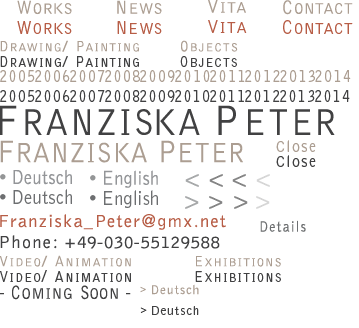
<style>
.page{position:relative;width:359px;height:328px;background:#ffffff}
.page>*{position:absolute;margin:0}
.t1{font:19.1px "BellGothicStd-Light";letter-spacing:0.06em;color:#ac9e92;font-variant:small-caps;scale:0.84 1}
.t2{font:22px "BellGothicStd-Light";letter-spacing:0.02em;color:#ac9e92;font-variant:small-caps}
.t3{font:21.6px "BellGothicStd-Light";color:#ac9e92;font-variant:small-caps}
.t4{font:22px "BellGothicStd-Light";letter-spacing:0.03em;color:#ac9e92;font-variant:small-caps}
.t5{font:22px "BellGothicStd-Light";color:#ac9e92;font-variant:small-caps}
.t6{font:19.1px "BellGothicStd-Light";letter-spacing:0.04em;color:#ac9e92;font-variant:small-caps;scale:0.92 1}
.t7{font:22px "BellGothicStd-Light";letter-spacing:0.06em;color:#ac9e92;font-variant:small-caps}
.t8{font:19.1px "BellGothicStd-Light";letter-spacing:0.07em;color:#ac9e92;font-variant:small-caps;scale:0.92 1}
.t9{font:22px "BellGothicStd-Light";letter-spacing:0.025em;color:#ac9e92;font-variant:small-caps}
.t10{font:19.6px "BellGothicStd-Light";letter-spacing:0.08em;color:#ac9e92;font-variant:small-caps;scale:0.9 1}
.t11{font:22px "BellGothicStd-Light";letter-spacing:0.02em;color:#b75d46;font-variant:small-caps}
.t12{font:19.1px "BellGothicStd-Light";letter-spacing:0.06em;color:#b75d46;font-variant:small-caps;scale:0.84 1}
.t13{font:22.4px "BellGothicStd-Light";letter-spacing:0.02em;color:#b75d46;font-variant:small-caps}
.t14{font:22px "BellGothicStd-Light";color:#b75d46;font-variant:small-caps}
.t15{font:19.1px "BellGothicStd-Light";letter-spacing:0.04em;color:#b75d46;font-variant:small-caps;scale:0.92 1}
.t16{font:19.1px "BellGothicStd-Light";letter-spacing:0.07em;color:#b75d46;font-variant:small-caps;scale:0.92 1}
.t17{font:22px "BellGothicStd-Light";letter-spacing:0.06em;color:#b75d46;font-variant:small-caps}
.t18{font:22.9px "BellGothicStd-Light";letter-spacing:0.025em;color:#b75d46;font-variant:small-caps;scale:0.96 1}
.t19{font:19.8px "BellGothicStd-Light";letter-spacing:0.08em;color:#b75d46;font-variant:small-caps;scale:0.89 1}
.t20{font:22px "BellGothicStd-Light";letter-spacing:-0.04em;color:#b75d46;font-variant:small-caps}
.t21{font:23.1px "BellGothicStd-Light";letter-spacing:0.02em;color:#b75d46;font-variant:small-caps;scale:0.95 1}
.t22{font:17px "BellGothicStd-Light";letter-spacing:0.08em;color:#ac9e92;font-variant:small-caps}
.t23{font:15.3px "BellGothicStd-Light";letter-spacing:0.1em;color:#ac9e92;font-variant:small-caps;scale:0.89 1}
.t24{font:15.3px "BellGothicStd-Light";letter-spacing:0.1em;color:#ac9e92;font-variant:small-caps;scale:1.11 1}
.t25{font:15.3px "BellGothicStd-Light";letter-spacing:0.06em;color:#ac9e92;font-variant:small-caps;scale:0.89 1}
.t26{font:17px "BellGothicStd-Light";letter-spacing:0.08em;color:#414142;font-variant:small-caps}
.t27{font:15.3px "BellGothicStd-Light";letter-spacing:0.1em;color:#414142;font-variant:small-caps;scale:0.89 1}
.t28{font:15.3px "BellGothicStd-Light";letter-spacing:0.1em;color:#414142;font-variant:small-caps;scale:1.11 1}
.t29{font:15.3px "BellGothicStd-Light";letter-spacing:0.06em;color:#414142;font-variant:small-caps;scale:0.89 1}
.t30{font:18px "BellGothicStd-Light";letter-spacing:0.1em;color:#ac9e92;font-variant:small-caps;scale:0.8 1}
.t31{font:18px "BellGothicStd-Light";letter-spacing:0.1em;color:#ac9e92;font-variant:small-caps;scale:0.77 1}
.t32{font:18px "BellGothicStd-Light";letter-spacing:0.1em;color:#414142;font-variant:small-caps;scale:0.8 1}
.t33{font:55px "BellGothicStd-Light";letter-spacing:0.04em;color:#414142;font-variant:small-caps;scale:0.9 1}
.t34{font:44px "BellGothicStd-Light";letter-spacing:0.04em;color:#414142;font-variant:small-caps;scale:0.9 1}
.t35{font:52.2px "BellGothicStd-Light";letter-spacing:-0.06em;color:#414142;font-variant:small-caps;scale:0.95 1}
.t36{font:55px "BellGothicStd-Light";letter-spacing:0.06em;color:#414142;font-variant:small-caps;scale:0.9 1}
.t37{font:44px "BellGothicStd-Light";letter-spacing:0.1em;color:#414142;font-variant:small-caps;scale:0.9 1}
.t38{font:41px "BellGothicStd-Light";letter-spacing:0.02em;color:#ac9e92;font-variant:small-caps;scale:0.9 1}
.t39{font:32px "BellGothicStd-Light";color:#ac9e92;font-variant:small-caps;scale:0.9 1}
.t40{font:39.8px "BellGothicStd-Light";letter-spacing:0.02em;color:#ac9e92;font-variant:small-caps;scale:0.93 1}
.t41{font:16px "BellGothicStd-Light";letter-spacing:0.08em;color:#ac9e92}
.t42{font:16px "BellGothicStd-Light";letter-spacing:0.08em;color:#414142}
.t43{font:20px "BellGothicStd-Light";letter-spacing:0.02em;color:#939598;scale:0.9 1}
.t44{font:21px "BellGothicStd-Light";letter-spacing:0.02em;color:#939598;scale:0.9 1}
.t45{font:20px "BellGothicStd-Light";letter-spacing:0.02em;color:#6d6f71;scale:0.9 1}
.t46{font:21px "BellGothicStd-Light";letter-spacing:0.02em;color:#6d6f71;scale:0.9 1}
.t47{font:18px "BellGothicStd-Light";letter-spacing:0.08em;color:#b75d46}
.t48{font:15.3px "BellGothicStd-Light";letter-spacing:0.1em;color:#6d6f71;scale:0.89 1}
.t49{font:18px "BellGothicStd-Light";letter-spacing:0.08em;color:#414142}
.t50{font:18px "BellGothicStd-Light";color:#414142}
.t51{font:18px "BellGothicStd-Light";letter-spacing:0.04em;color:#414142}
.t52{font:17px "BellGothicStd-Light";letter-spacing:0.1em;color:#ac9e92;font-variant:small-caps}
.t53{font:17px "BellGothicStd-Light";letter-spacing:0.1em;color:#414142;font-variant:small-caps}
.t54{font:22px "BellGothicStd-Light";letter-spacing:0.02em;color:#414142;font-variant:small-caps}
.t55{font:19.1px "BellGothicStd-Light";letter-spacing:0.06em;color:#414142;font-variant:small-caps;scale:0.84 1}
.t56{font:19.1px "BellGothicStd-Light";letter-spacing:-0.02em;color:#414142;font-variant:small-caps;scale:0.84 1}
.t57{font:22px "BellGothicStd-Light";color:#414142;font-variant:small-caps}
.t58{font:13px "BellGothicStd-Light";letter-spacing:0.08em;color:#ac9e92}
.t59{font:10px "BellGothicStd-Light";letter-spacing:0.08em;color:#ac9e92}
.t60{font:13px "BellGothicStd-Light";letter-spacing:0.04em;color:#ac9e92}
.t61{font:13px "BellGothicStd-Light";letter-spacing:0.08em;color:#ac9e92;scale:1.06 1}
.t62{font:13px "BellGothicStd-Light";letter-spacing:0.08em;color:#414142}
.t63{font:10px "BellGothicStd-Light";letter-spacing:0.08em;color:#414142}
.t64{font:11.7px "BellGothicStd-Light";letter-spacing:0.08em;color:#414142;scale:1.11 1}
.t65{font:13px "BellGothicStd-Light";letter-spacing:0.06em;color:#414142}
.t66{font:12.3px "BellGothicStd-Light";letter-spacing:0.12em;color:#414142;scale:1.04 1}
.t67{font:13px "BellGothicStd-Light";letter-spacing:0.04em;color:#414142}
.t68{font:11.8px "BellGothicStd-Light";letter-spacing:0.08em;color:#414142;scale:1.1 1}
</style>
<div class="page">
<p class="t1" style="left:17px;top:0px;width:55px;height:15px">W<span class="t2">o</span><span class="t3">r</span><span class="t4">k</span><span class="t2">s</span></p>
<p class="t5" style="left:117px;top:0px;width:45px;height:14px"><span class="t6">N</span><span class="t2">e</span>ws</p>
<p class="t7" style="left:208px;top:0px;width:38px;height:13px"><span class="t8">V</span>it<span class="t9">a</span></p>
<p class="t2" style="left:283px;top:0px;width:70px;height:15px"><span class="t10">C</span>ontact</p>
<p class="t11" style="left:17px;top:21px;width:55px;height:13px"><span class="t12">W</span>o<span class="t13">r</span>ks</p>
<p class="t14" style="left:117px;top:21px;width:45px;height:13px"><span class="t15">N</span><span class="t11">e</span>ws</p>
<p class="t16" style="left:208px;top:20px;width:39px;height:13px">V<span class="t17">i</span><span class="t11">t</span><span class="t18">a</span></p>
<p class="t11" style="left:283px;top:20px;width:70px;height:14px"><span class="t19">C</span>on<span class="t20">t</span><span class="t21">a</span>ct</p>
<p class="t22" style="left:0px;top:40px;width:139px;height:12px"><span class="t23">D</span>rawing<span class="t24">/ </span><span class="t25">P</span>ainting</p>
<p class="t22" style="left:181px;top:40px;width:57px;height:12px"><span class="t23">O</span>bjects</p>
<p class="t26" style="left:0px;top:56px;width:139px;height:11px"><span class="t27">D</span>rawing<span class="t28">/ </span><span class="t29">P</span>ainting</p>
<p class="t26" style="left:180px;top:56px;width:57px;height:11px"><span class="t27">O</span>bjects</p>
<p class="t30" style="left:0px;top:70px;width:35px;height:12px">2005</p>
<p class="t30" style="left:35px;top:70px;width:35px;height:12px">200<span class="t31">6</span></p>
<p class="t30" style="left:70px;top:70px;width:35px;height:12px">2007</p>
<p class="t30" style="left:105px;top:70px;width:35px;height:12px">2008</p>
<p class="t30" style="left:140px;top:70px;width:35px;height:12px">2009</p>
<p class="t30" style="left:175px;top:70px;width:35px;height:12px">2010</p>
<p class="t30" style="left:210px;top:70px;width:35px;height:12px">2011</p>
<p class="t30" style="left:245px;top:70px;width:35px;height:12px">2012</p>
<p class="t30" style="left:280px;top:70px;width:35px;height:12px">2013</p>
<p class="t30" style="left:315px;top:70px;width:36px;height:12px">2014</p>
<p class="t32" style="left:0px;top:90px;width:35px;height:12px">2005</p>
<p class="t32" style="left:35px;top:90px;width:35px;height:12px">2006</p>
<p class="t32" style="left:70px;top:90px;width:35px;height:12px">2007</p>
<p class="t32" style="left:105px;top:90px;width:35px;height:12px">2008</p>
<p class="t32" style="left:140px;top:90px;width:35px;height:12px">2009</p>
<p class="t32" style="left:175px;top:90px;width:35px;height:12px">2010</p>
<p class="t32" style="left:210px;top:90px;width:34px;height:12px">2011</p>
<p class="t32" style="left:245px;top:90px;width:35px;height:12px">2012</p>
<p class="t32" style="left:280px;top:90px;width:35px;height:12px">2013</p>
<p class="t32" style="left:315px;top:90px;width:35px;height:12px">2014</p>
<p class="t33" style="left:0px;top:105px;width:335px;height:30px"><span class="t34">F</span>ranzi<span class="t35">s</span><span class="t36">k</span>a <span class="t37">P</span>eter</p>
<p class="t38" style="left:0px;top:140px;width:243px;height:23px"><span class="t39">F</span>ranzi<span class="t40">s</span>ka <span class="t39">P</span>eter</p>
<p class="t41" style="left:276px;top:140px;width:40px;height:12px">Close</p>
<p class="t42" style="left:276px;top:155px;width:40px;height:12px">Close</p>
<p class="t43" style="left:13px;top:169px;width:59px;height:16px"><span class="t44">D</span>eutsch</p>
<p class="t43" style="left:104px;top:170px;width:54px;height:18px"><span class="t44">E</span>nglish</p>
<p class="t45" style="left:13px;top:189px;width:59px;height:15px"><span class="t46">D</span>eutsch</p>
<p class="t45" style="left:104px;top:190px;width:54px;height:18px"><span class="t46">E</span>nglish</p>
<p class="t47" style="left:0px;top:214px;width:226px;height:16px">Franziska_Peter@gmx.net</p>
<p class="t48" style="left:260px;top:220px;width:46px;height:12px">Details</p>
<p class="t49" style="left:0px;top:235px;width:220px;height:14px">Phone: +<span class="t50">49</span><span class="t51">-</span><span class="t50">030</span><span class="t51">-</span><span class="t50">55129588</span></p>
<p class="t52" style="left:0px;top:255px;width:131px;height:12px"><span class="t23">V</span>ideo<span class="t24">/ </span><span class="t23">A</span>nimation</p>
<p class="t22" style="left:196px;top:256px;width:85px;height:11px"><span class="t23">E</span>xhibitions</p>
<p class="t53" style="left:0px;top:270px;width:131px;height:12px"><span class="t27">V</span>ideo/ <span class="t27">A</span>nimation</p>
<p class="t26" style="left:195px;top:271px;width:86px;height:11px"><span class="t27">E</span>xhibitions</p>
<p class="t54" style="left:0px;top:285px;width:131px;height:15px"><span class="t55"> - C</span>oming <span class="t56">S</span><span class="t57">o</span>on<span class="t55"> -</span></p>
<p class="t58" style="left:140px;top:284px;width:59px;height:11px"><span class="t59">&gt; </span>Deuts<span class="t60">c</span><span class="t61">h</span></p>
<p class="t62" style="left:140px;top:306px;width:59px;height:9px"><span class="t63">&gt; </span><span class="t64">D</span><span class="t65">e</span><span class="t66">u</span>ts<span class="t67">c</span><span class="t68">h</span></p>
</div>
